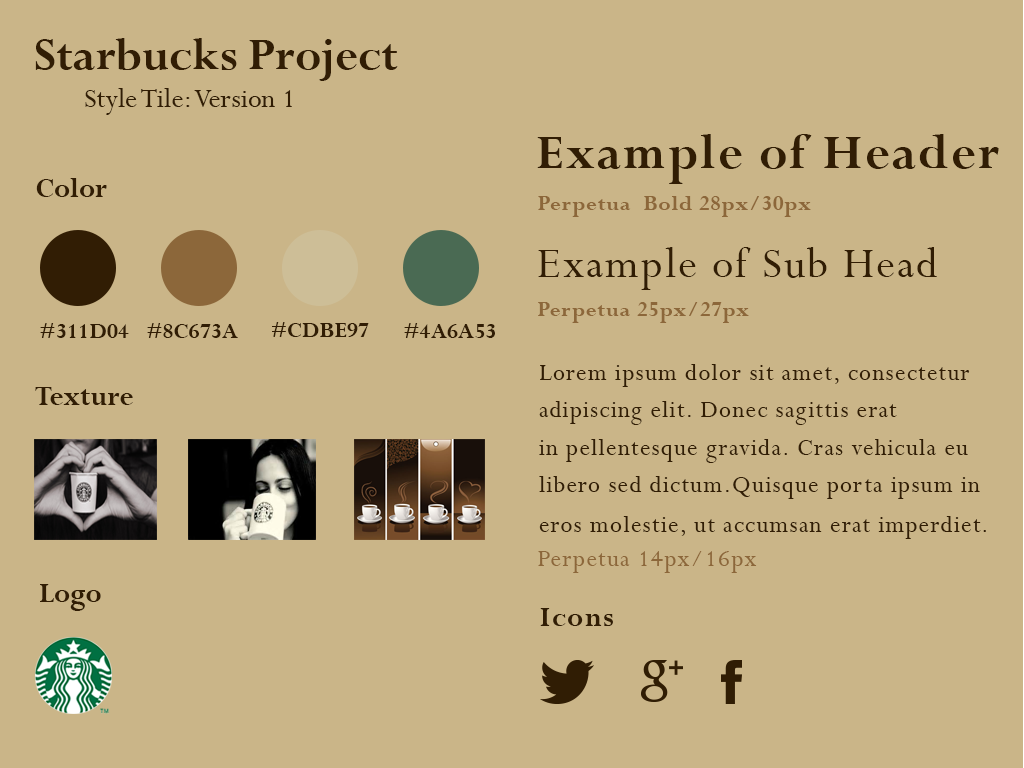
<style>
.page{position:relative;width:1024px;height:768px;background:#cab588}
.page>*{position:absolute;margin:0}
.t1{font:48.8px "Perpetua-Bold";color:#311d04}
.t2{font:30px "Perpetua";color:#311d04}
.t3{font:52.5px "Perpetua-Bold";letter-spacing:0.044em;color:#311d04}
.t4{font:30px "Perpetua-Bold";color:#311d04}
.t5{font:22.5px "Perpetua-Bold";letter-spacing:0.044em;color:#8c673a}
.t6{font:46.9px "Perpetua";letter-spacing:0.044em;color:#311d04}
.t7{font:12px/45px "Perpetua-Bold";letter-spacing:0.044em;color:#8c673a}
.t8{font:24.4px "Perpetua-Bold";color:#311d04}
.t9{font:26.2px/37.5px "Perpetua";letter-spacing:0.044em;color:#311d04}
.t10{font:20px/40px "CenturyGothic";letter-spacing:0.044em;color:#311d04}
.t11{font:26.2px "Perpetua";letter-spacing:0.044em;color:#8c673a}
.t12{font:30px "Perpetua-Bold";letter-spacing:0.044em;color:#311d04}
</style>
<div class="page">
<p class="t1" style="left:35px;top:38px;width:363px;height:43px">Starbucks Project</p>
<p class="t2" style="left:85px;top:88px;width:207px;height:27px">Style Tile: Version 1</p>
<p class="t3" style="left:537px;top:134px;width:462px;height:50px">Example of Header</p>
<p class="t4" style="left:36px;top:178px;width:71px;height:19px">Color</p>
<p class="t5" style="left:538px;top:196px;width:273px;height:21px">Perpetua  Bold 28px/30px</p>
<p class="t6" style="left:538px;top:247px;width:399px;height:43px">Example of Sub Head</p>
<p class="t7" style="left:538px;top:302px;width:211px;height:21px">Perpetua 25px/27px</p>
<p class="t8" style="left:40px;top:323px;width:89px;height:15px">#311D04</p>
<p class="t8" style="left:147px;top:323px;width:91px;height:15px">#8C673A</p>
<p class="t8" style="left:272px;top:322px;width:97px;height:15px">#CDBE97</p>
<p class="t8" style="left:404px;top:323px;width:91px;height:15px">#4A6A53</p>
<p class="t9" style="left:539px;top:364px;width:447px;height:175px">Lorem ipsum dolor sit amet, consectetur <br>adipiscing elit. Donec sagittis erat <br>in pellentesque gravida. Cras vehicula eu <br>libero sed dictum.Quisque porta ipsum in<br>eros molestie, ut accumsan erat imperdiet<span class="t10">.</span></p>
<p class="t4" style="left:35px;top:387px;width:98px;height:18px">Texture</p>
<p class="t11" style="left:538px;top:551px;width:219px;height:22px">Perpetua 14px/16px</p>
<p class="t4" style="left:40px;top:584px;width:61px;height:27px">Logo</p>
<p class="t12" style="left:540px;top:608px;width:73px;height:18px">Icons</p>
</div>
